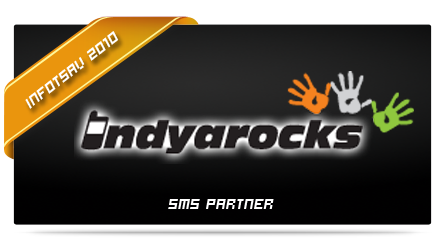
<style>
.page{position:relative;width:445px;height:245px}
.page>*{position:absolute;margin:0}
.t1{font:16px "Hooge0555";color:#ffffff;font-style:italic}
.t2{font:15.9px "Hooge0555";color:#ffffff;font-style:italic}
</style>
<div class="page">
<p class="t1" style="left:25px;top:31px;width:94px;height:78px;rotate:-38deg">Infotsav 2010</p>
<p class="t2" style="left:168px;top:199px;width:106px;height:10px">SMS partner</p>
</div>
